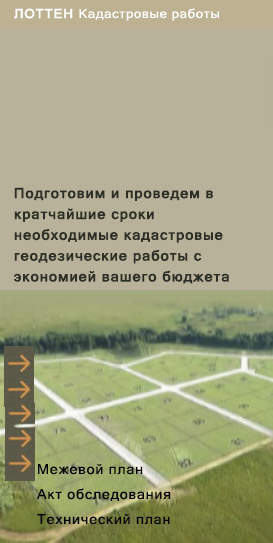
<style>
.page{position:relative;width:273px;height:543px;background:#b9b29a}
.page>*{position:absolute;margin:0}
.t1{font:12.5px "MicrosoftSansSerif";letter-spacing:0.05em;color:#ffffff;scale:1.05 1}
.t2{font:12.5px "MicrosoftSansSerif";letter-spacing:0.05em;color:#ffffff;font-weight:bold;scale:1.05 1}
.t3{font:13.8px/20.8px "MicrosoftSansSerif";letter-spacing:0.05em;color:#2b2f26;font-weight:bold;scale:1.05 1}
.t4{font:13.8px/25px "MicrosoftSansSerif";letter-spacing:0.05em;color:#000000;scale:1.05 1}
</style>
<div class="page">
<p class="t1" style="left:14px;top:8px;width:205px;height:13px"><span class="t2">ЛОТТЕН </span>Кадастровые работы</p>
<p class="t3" style="left:14px;top:187px;width:215px;height:97px">Подготовим и проведем в <br>кратчайшие сроки<br>необходимые кадастровые<br>геодезические работы с<br>экономией вашего бюджета</p>
<p class="t4" style="left:36px;top:464px;width:135px;height:61px">Межевой план<br>Акт обследования<br>Технический план</p>
</div>
